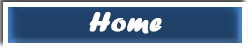
<style>
.page{position:relative;width:252px;height:50px;background:#ffffff}
.page>*{position:absolute;margin:0}
.t1{font:28px "ForteMT";color:#ffffff;font-weight:bold}
</style>
<div class="page">
<p class="t1" style="left:89px;top:12px;width:73px;height:22px">Home</p>
</div>
